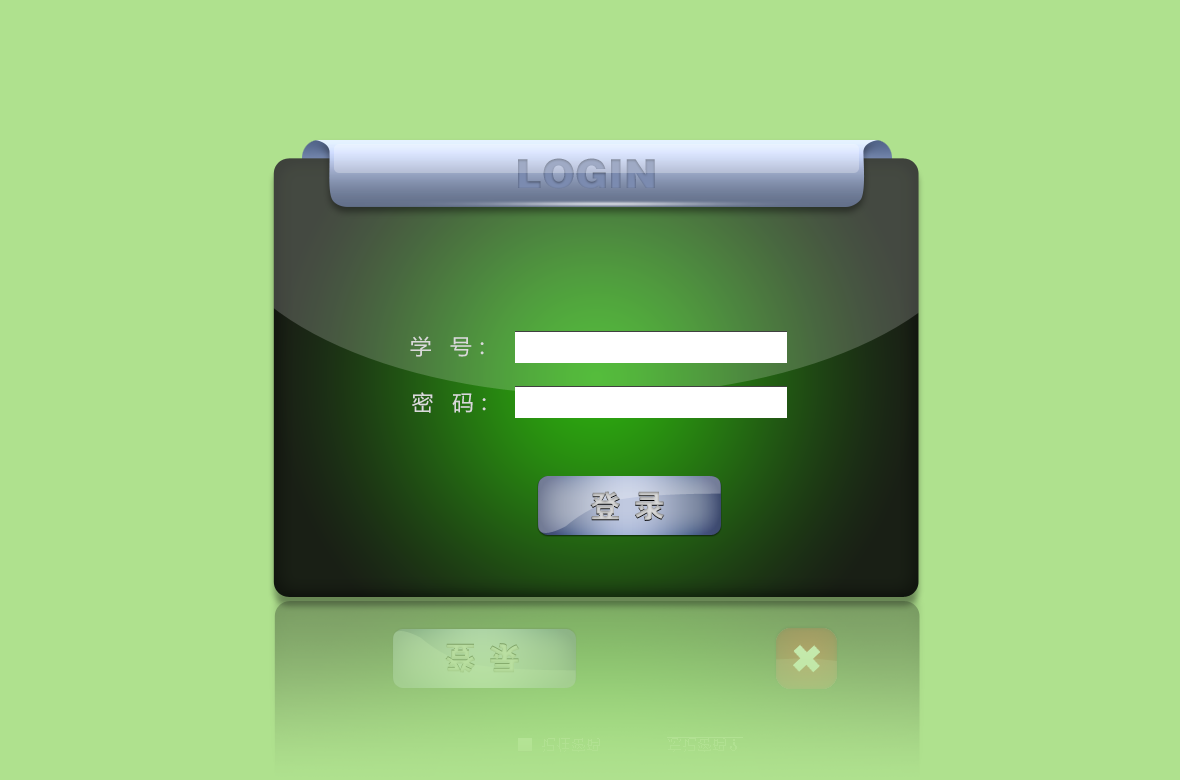
<style>
.page{position:relative;width:1180px;height:780px;background:#afe18e}
.page>*{position:absolute;margin:0}
.t1{font:40px "FZCCHJW--GB1-0"}
.t2{font:21.3px "MicrosoftYaHei";color:#dadada}
</style>
<div class="page">
<p class="t1" style="left:518px;top:158px;width:137px;height:31px">LOGIN</p>
<p class="t2" style="left:410px;top:336px;width:74px;height:21px">学   号：</p>
<p class="t2" style="left:412px;top:392px;width:74px;height:21px">密   码：</p>
</div>
